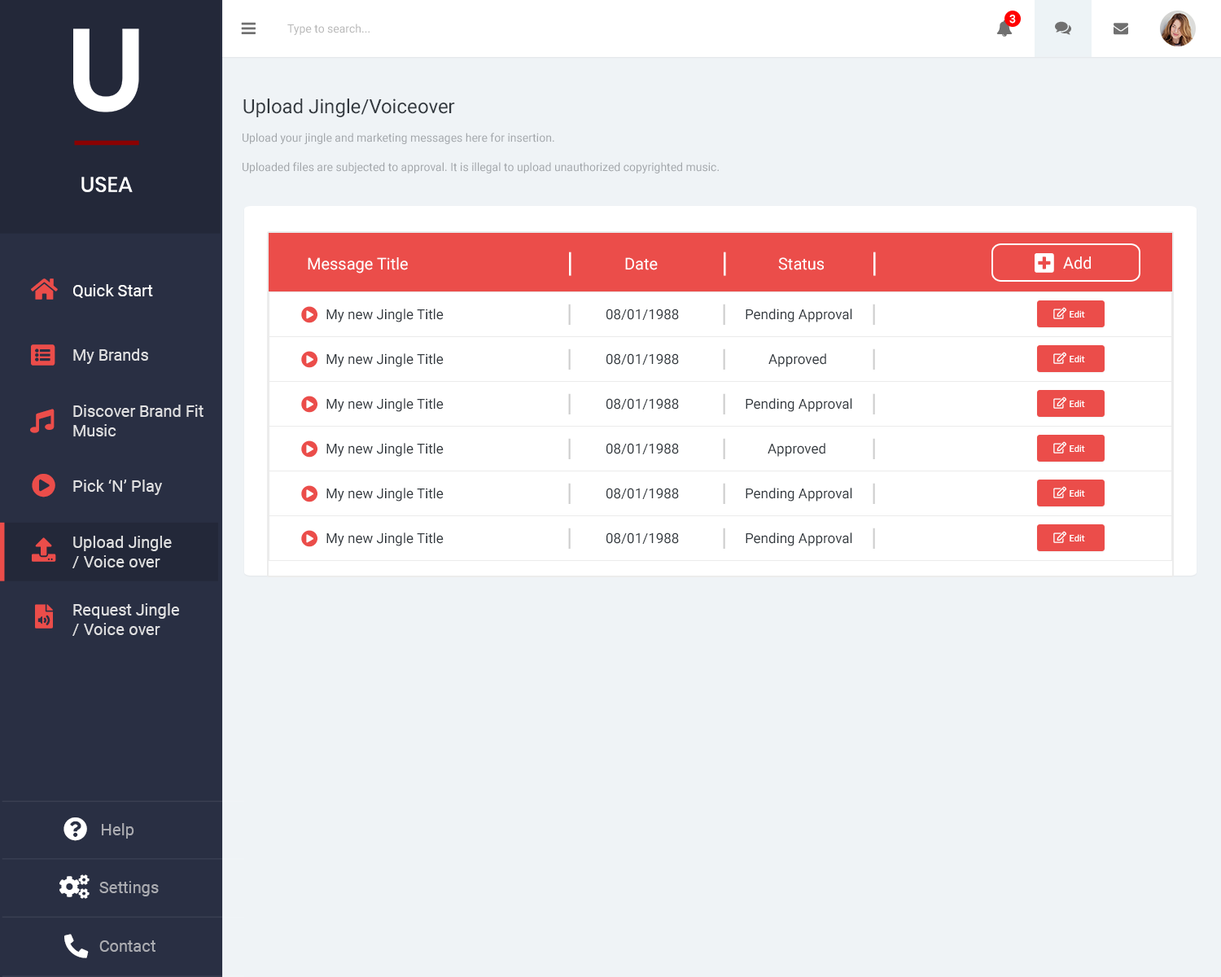
<style>
.page{position:relative;width:1221px;height:977px;background:#eff3f6}
.page>*{position:absolute;margin:0}
.t1{font:11.4px "Roboto-Medium";color:#ffffff}
.t2{font:11.4px "Roboto-Regular";color:#b7b7b7}
.t3{font:19.5px "Roboto-Regular";color:#31373d}
.t4{font:11.4px/29.3px "Roboto-Regular";color:#a2a6aa}
.t5{font:16.3px "Roboto-Regular";color:#ffffff}
.t6{font:27.7px "Roboto-Regular";color:#ffffff}
.t7{font:16.4px "Roboto-Regular";color:#ffffff}
.t8{font:24.4px "Roboto-Regular";color:#cecece}
.t9{font:13.8px "Roboto-Regular";color:#31373d}
.t10{font:9px "Roboto-Medium";color:#ffffff}
.t11{font:16.4px "Roboto-Regular";color:#e0e0e2}
.t12{font:16.4px "Roboto-Regular";color:#dfe0e1}
.t13{font:16.4px "Roboto-Regular";color:#abacb2}
</style>
<div class="page">
<p class="t1" style="left:1009px;top:15px;width:7px;height:9px">3</p>
<p class="t2" style="left:287px;top:24px;width:83px;height:11px">Type to search...</p>
<p class="t3" style="left:243px;top:98px;width:212px;height:19px">Upload Jingle/Voiceover</p>
<p class="t4" style="left:243px;top:133px;width:476px;height:40px">Upload your jingle and marketing messages here for insertion.<br>Uploaded files are subjected to approval. It is illegal to upload unauthorized copyrighted music.</p>
<p class="t5" style="left:308px;top:257px;width:100px;height:16px">Message Title</p>
<p class="t6" style="left:569px;top:252px;width:2px;height:24px">|</p>
<p class="t5" style="left:625px;top:257px;width:33px;height:13px">Date</p>
<p class="t6" style="left:724px;top:252px;width:2px;height:24px">|</p>
<p class="t5" style="left:778px;top:257px;width:46px;height:13px">Status</p>
<p class="t6" style="left:873px;top:252px;width:3px;height:24px">|</p>
<p class="t5" style="left:1063px;top:256px;width:28px;height:13px">Add</p>
<p class="t7" style="left:73px;top:284px;width:80px;height:14px">Quick Start</p>
<p class="t8" style="left:568px;top:304px;width:3px;height:21px">|</p>
<p class="t8" style="left:723px;top:304px;width:2px;height:21px">|</p>
<p class="t8" style="left:873px;top:304px;width:2px;height:21px">|</p>
<p class="t9" style="left:326px;top:308px;width:118px;height:14px">My new Jingle Title</p>
<p class="t9" style="left:606px;top:308px;width:73px;height:12px">08/01/1988</p>
<p class="t9" style="left:746px;top:308px;width:106px;height:14px">Pending Approval</p>
<p class="t10" style="left:1069px;top:310px;width:16px;height:7px">Edit</p>
<p class="t11" style="left:73px;top:348px;width:75px;height:16px">My Brands</p>
<p class="t9" style="left:326px;top:353px;width:118px;height:14px">My new Jingle Title</p>
<p class="t8" style="left:568px;top:348px;width:3px;height:22px">|</p>
<p class="t9" style="left:606px;top:353px;width:73px;height:12px">08/01/1988</p>
<p class="t8" style="left:723px;top:348px;width:2px;height:22px">|</p>
<p class="t9" style="left:768px;top:353px;width:58px;height:14px">Approved</p>
<p class="t8" style="left:873px;top:348px;width:2px;height:22px">|</p>
<p class="t10" style="left:1069px;top:355px;width:16px;height:7px">Edit</p>
<p class="t9" style="left:326px;top:398px;width:118px;height:14px">My new Jingle Title</p>
<p class="t8" style="left:568px;top:393px;width:3px;height:21px">|</p>
<p class="t9" style="left:606px;top:398px;width:73px;height:11px">08/01/1988</p>
<p class="t8" style="left:723px;top:393px;width:2px;height:21px">|</p>
<p class="t9" style="left:746px;top:398px;width:106px;height:14px">Pending Approval</p>
<p class="t8" style="left:873px;top:393px;width:2px;height:21px">|</p>
<p class="t10" style="left:1069px;top:400px;width:16px;height:7px">Edit</p>
<p class="t11" style="left:73px;top:405px;width:130px;height:31px">Discover Brand Fit <br>Music</p>
<p class="t8" style="left:568px;top:438px;width:3px;height:21px">|</p>
<p class="t8" style="left:723px;top:438px;width:2px;height:21px">|</p>
<p class="t8" style="left:873px;top:438px;width:2px;height:21px">|</p>
<p class="t9" style="left:326px;top:443px;width:118px;height:14px">My new Jingle Title</p>
<p class="t9" style="left:606px;top:443px;width:73px;height:11px">08/01/1988</p>
<p class="t9" style="left:768px;top:443px;width:57px;height:14px">Approved</p>
<p class="t10" style="left:1069px;top:444px;width:16px;height:8px">Edit</p>
<p class="t11" style="left:73px;top:479px;width:89px;height:16px">Pick ‘N’ Play</p>
<p class="t8" style="left:568px;top:483px;width:3px;height:21px">|</p>
<p class="t8" style="left:723px;top:483px;width:2px;height:21px">|</p>
<p class="t8" style="left:873px;top:483px;width:2px;height:21px">|</p>
<p class="t9" style="left:326px;top:488px;width:118px;height:13px">My new Jingle Title</p>
<p class="t9" style="left:606px;top:488px;width:73px;height:11px">08/01/1988</p>
<p class="t9" style="left:746px;top:488px;width:106px;height:13px">Pending Approval</p>
<p class="t10" style="left:1069px;top:489px;width:16px;height:7px">Edit</p>
<p class="t9" style="left:326px;top:532px;width:118px;height:14px">My new Jingle Title</p>
<p class="t8" style="left:568px;top:527px;width:3px;height:22px">|</p>
<p class="t9" style="left:606px;top:532px;width:73px;height:12px">08/01/1988</p>
<p class="t8" style="left:723px;top:527px;width:2px;height:22px">|</p>
<p class="t9" style="left:746px;top:532px;width:106px;height:14px">Pending Approval</p>
<p class="t8" style="left:873px;top:527px;width:2px;height:22px">|</p>
<p class="t10" style="left:1069px;top:534px;width:16px;height:7px">Edit</p>
<p class="t12" style="left:72px;top:536px;width:100px;height:32px">Upload Jingle<br>/ Voice over</p>
<p class="t11" style="left:72px;top:603px;width:107px;height:33px">Request Jingle<br>/ Voice over</p>
<p class="t13" style="left:102px;top:823px;width:32px;height:15px">Help</p>
<p class="t13" style="left:99px;top:881px;width:60px;height:15px">Settings</p>
<p class="t13" style="left:99px;top:940px;width:56px;height:11px">Contact</p>
</div>
